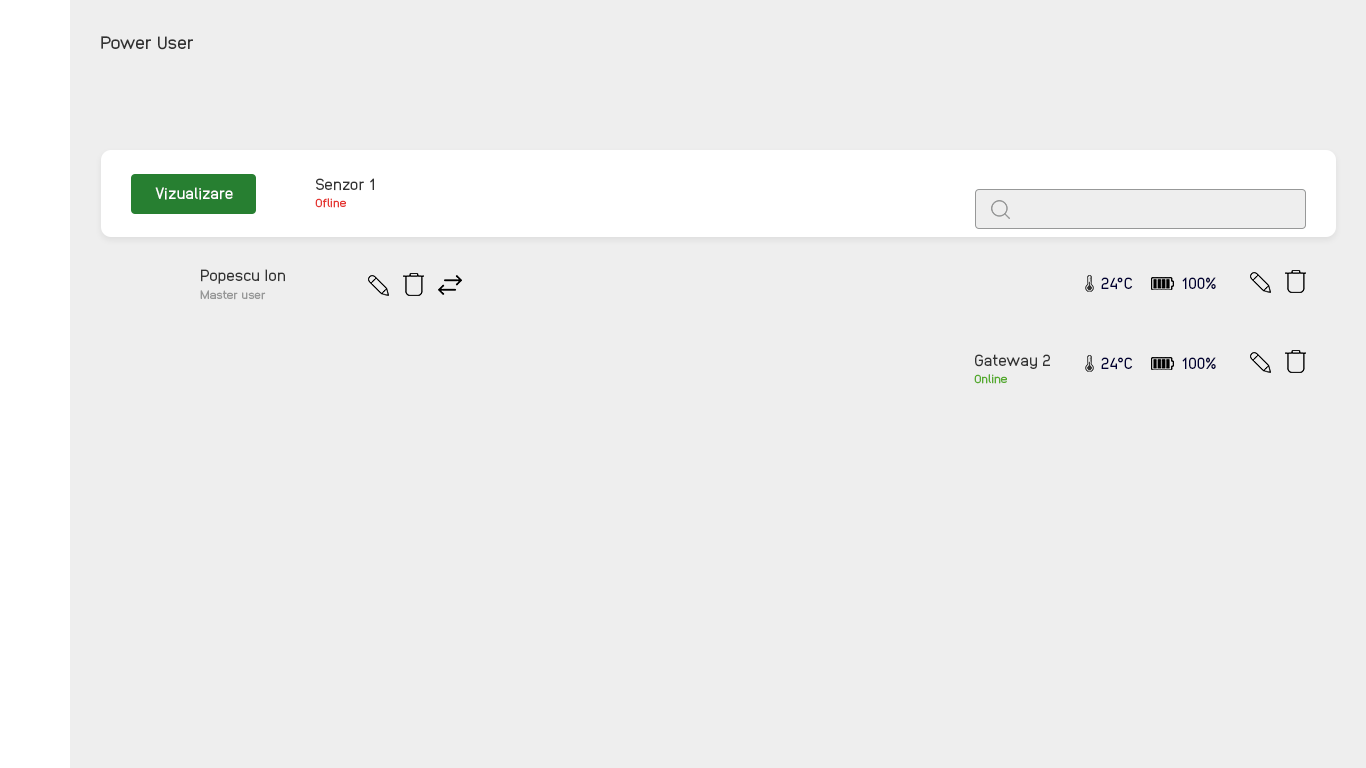
<style>
.page{position:relative;width:1366px;height:768px;background:#eeeeee}
.page>*{position:absolute;margin:0}
.t1{font:18px "Anodina-Regular";color:#333333}
.t2{font:16.1px "Anodina-Regular";color:#333333}
.t3{font:16px "Anodina-Regular";color:#ffffff}
.t4{font:12.1px "Anodina-Regular";color:#e53935}
.t5{font:16px "Anodina-Regular";color:#333333}
.t6{font:16px "Anodina-Regular";color:#000033}
.t7{font:12px "Anodina-Regular";color:#979898}
.t8{font:12.1px "Anodina-Regular";color:#56ab2f}
</style>
<div class="page">
<p class="t1" style="left:101px;top:36px;width:92px;height:14px">Power User</p>
<p class="t2" style="left:316px;top:178px;width:58px;height:13px">Senzor 1</p>
<p class="t3" style="left:155px;top:187px;width:78px;height:13px">Vizualizare</p>
<p class="t4" style="left:315px;top:198px;width:31px;height:10px">Ofline</p>
<p class="t5" style="left:201px;top:269px;width:84px;height:15px">Popescu Ion</p>
<p class="t6" style="left:1101px;top:277px;width:32px;height:13px">24°C</p>
<p class="t6" style="left:1182px;top:277px;width:34px;height:12px">100%</p>
<p class="t7" style="left:200px;top:290px;width:66px;height:10px">Master user</p>
<p class="t2" style="left:975px;top:354px;width:75px;height:15px">Gateway 2</p>
<p class="t6" style="left:1101px;top:357px;width:32px;height:13px">24°C</p>
<p class="t6" style="left:1182px;top:357px;width:34px;height:12px">100%</p>
<p class="t8" style="left:974px;top:374px;width:33px;height:10px">Online</p>
</div>
